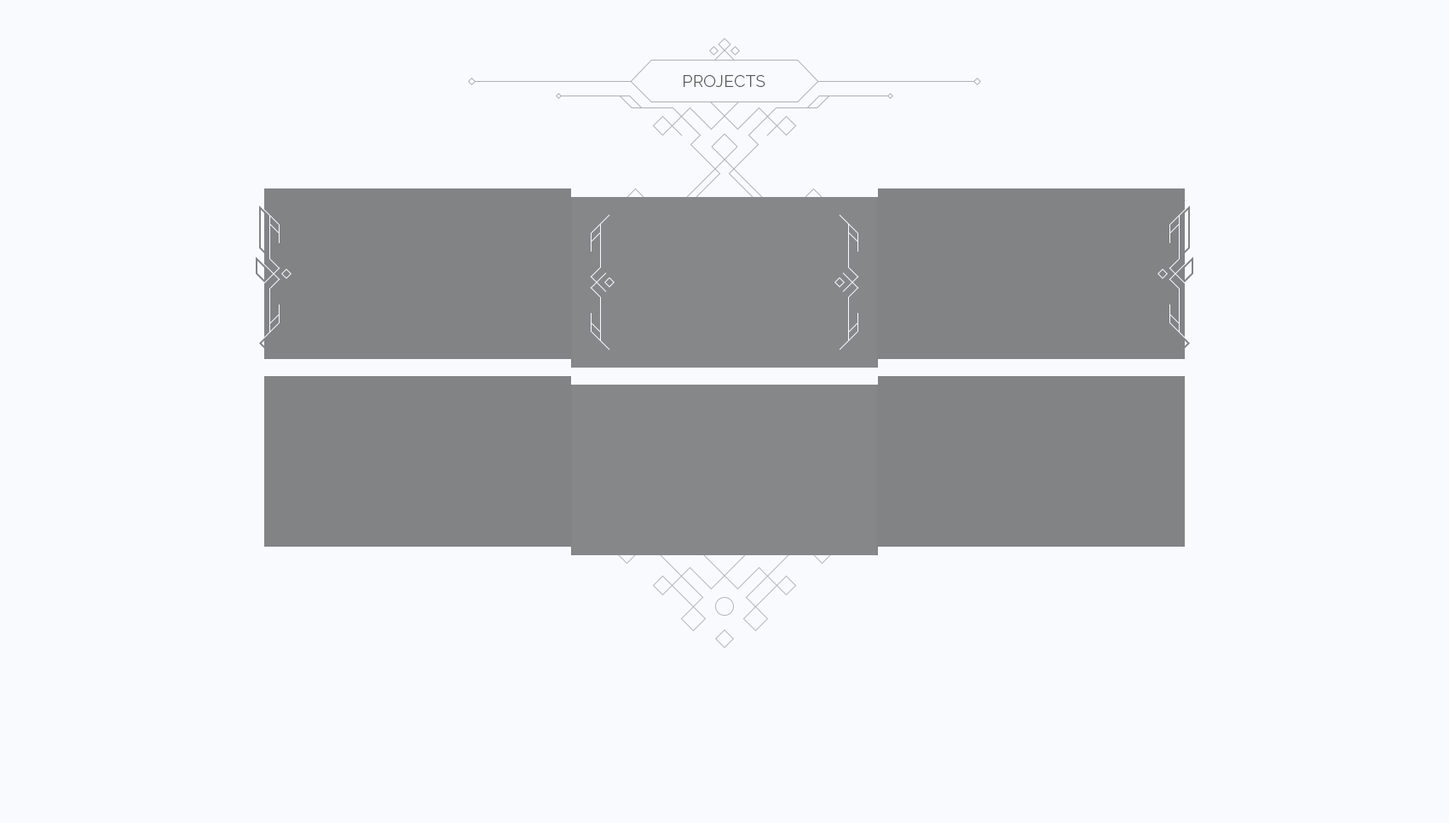
<style>
.page{position:relative;width:1449px;height:823px;background:#f8fafd}
.page>*{position:absolute;margin:0}
.t1{font:16.2px "Raleway-Light";letter-spacing:0.02em;color:#5a5a5a}
</style>
<div class="page">
<p class="t1" style="left:684px;top:75px;width:82px;height:12px">PROJECTS</p>
</div>
